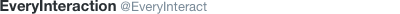
<style>
.page{position:relative;width:400px;height:14px;background:#ffffff}
.page>*{position:absolute;margin:0}
.t1{font:15px "HelveticaNeue-Bold";color:#292f33}
.t2{font:13px "HelveticaNeue";color:#788a98}
</style>
<div class="page">
<p class="t1" style="left:0px;top:0px;width:207px;height:14px">EveryInteraction <span class="t2">@EveryInteract</span></p>
</div>
